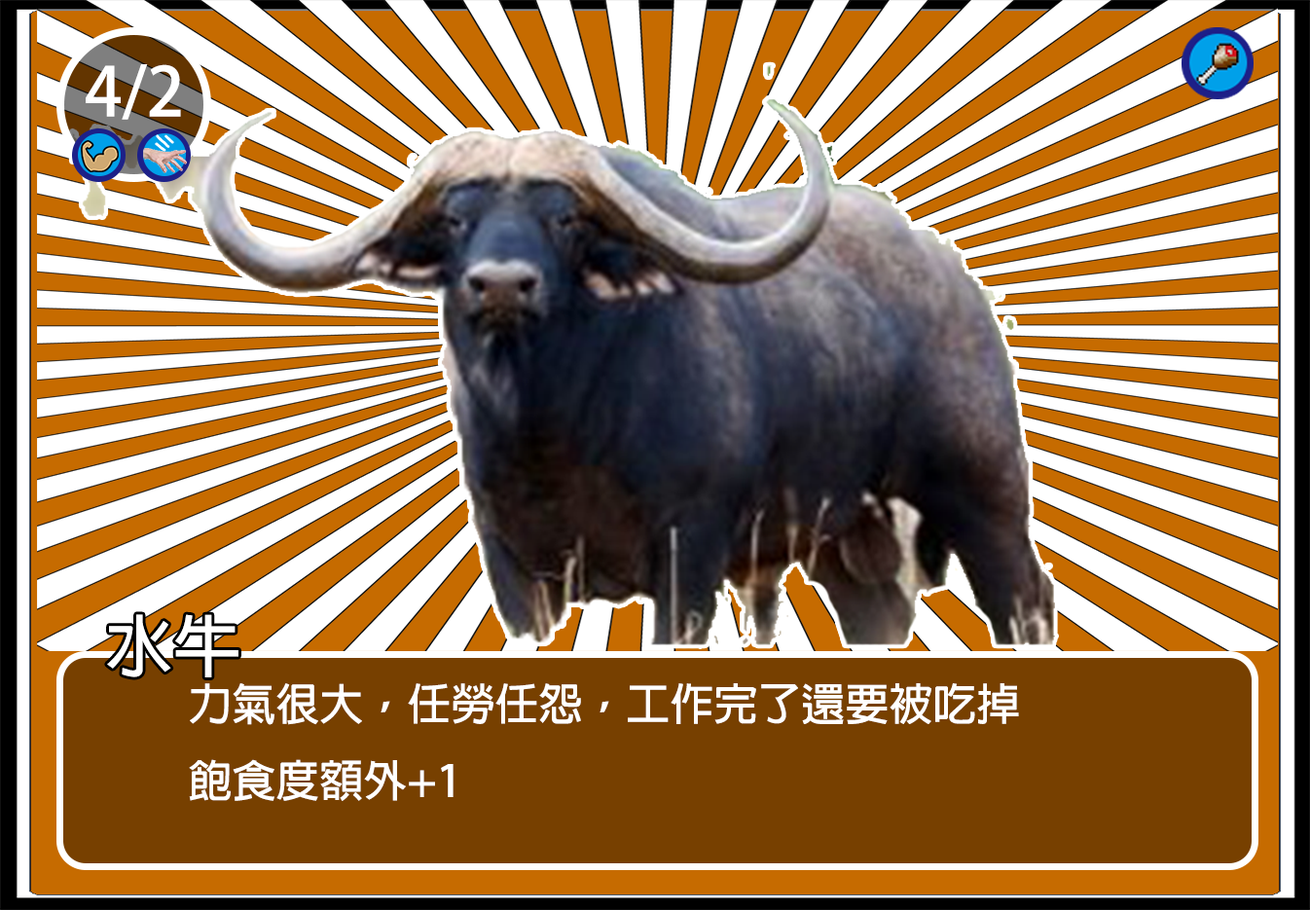
<style>
.page{position:relative;width:1310px;height:910px}
.page>*{position:absolute;margin:0}
.t1{font:66.9px "AdobeFanHeitiStd-Bold";color:#ffffff}
.t2{font:68.1px "AdobeFanHeitiStd-Bold";color:#ffffff}
.t3{font:43.8px "AdobeFanHeitiStd-Bold";color:#ffffff}
</style>
<div class="page">
<p class="t1" style="left:86px;top:64px;width:95px;height:56px">4/2</p>
<p class="t2" style="left:107px;top:614px;width:131px;height:63px">水牛</p>
<p class="t3" style="left:189px;top:683px;width:830px;height:118px">力氣很大，任勞任怨，工作完了還要被吃掉<br>飽食度額外+1</p>
</div>
